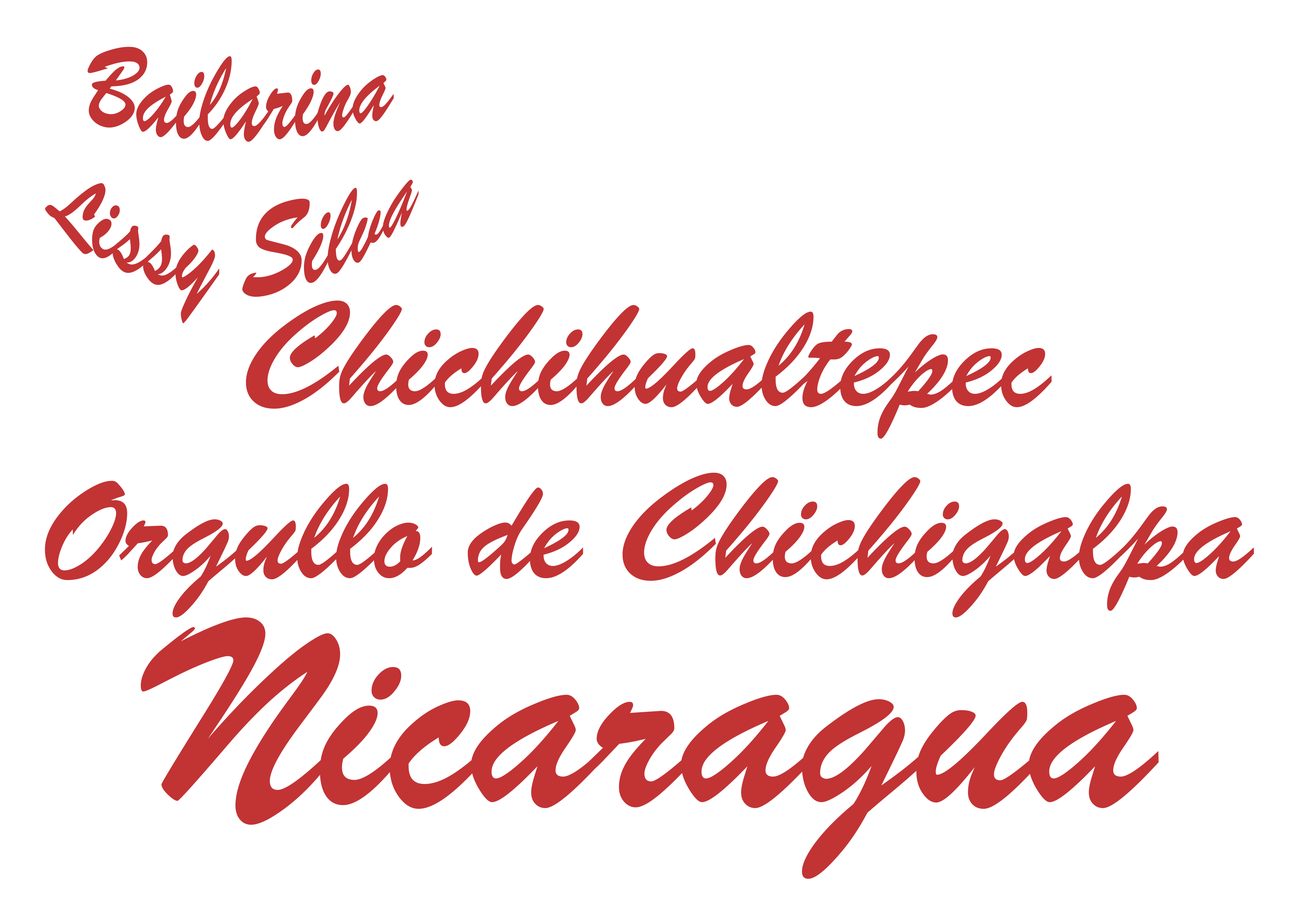
<style>
.page{position:relative;width:1299px;height:918px;background:#ffffff}
.page>*{position:absolute;margin:0}
.t1{font:86.4px "BrushScriptRegularSWFTE";color:#c23334}
.t2{font:143.5px "BrushScriptRegularSWFTE";color:#c23334}
.t3{font:262.2px "BrushScriptRegularSWFTE";color:#c23334}
</style>
<div class="page">
<p class="t1" style="left:45px;top:47px;width:374px;height:277px;text-align:center">Bailarina<br>Lissy Silva</p>
<p class="t2" style="left:45px;top:301px;width:1209px;height:317px;text-align:center">Chichihualtepec<br>Orgullo de Chichigalpa</p>
<p class="t3" style="left:141px;top:618px;width:1017px;height:261px">Nicaragua</p>
</div>
